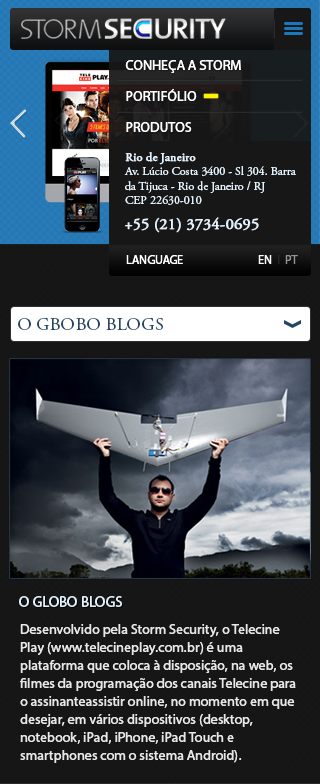
<style>
.page{position:relative;width:320px;height:784px;background:#161616}
.page>*{position:absolute;margin:0}
.t1{font:14px/31.2px "MyriadHebrew-Regular";color:#fefefe}
.t2{font:12px "AGaramondPro-Regular";color:#e4f2fd}
.t3{font:12px "AGaramondPro-Regular";color:#e4f2fd;font-weight:bold}
.t4{font:16px "AGaramondPro-Regular";color:#e4f2fd;font-weight:bold}
.t5{font:12px "MyriadHebrew-Regular";color:#fefefe}
.t6{font:12px "MyriadHebrew-Regular";color:#929292}
.t7{font:18px "AGaramondPro-Regular";color:#244563;text-transform:uppercase}
.t8{font:15px "MyriadHebrew-Regular";color:#e4f2fd}
.t9{font:14px/18px "MyriadHebrew-Regular";color:#e8e7e7}
</style>
<div class="page">
<p class="t1" style="left:125px;top:60px;width:116px;height:72px">CONHEÇA A STORM<br>PORTIFÓLIO<br>PRODUTOS</p>
<p class="t2" style="left:124px;top:152px;width:172px;height:53px"><span class="t3">Rio de Janeiro<br></span>Av. Lúcio Costa 3400 - Sl 304. Barra da Tijuca - Rio de Janeiro / RJ<br>CEP 22630-010</p>
<p class="t4" style="left:125px;top:217px;width:134px;height:16px">+55 (21) 3734-0695</p>
<p class="t5" style="left:126px;top:255px;width:57px;height:9px">LANGUAGE</p>
<p class="t5" style="left:258px;top:255px;width:40px;height:9px">EN     <span class="t6">PT</span></p>
<p class="t7" style="left:18px;top:317px;width:145px;height:13px">O GBOBO BLOGS</p>
<p class="t8" style="left:19px;top:596px;width:103px;height:11px">O GLOBO BLOGS</p>
<p class="t9" style="left:20px;top:624px;width:276px;height:139px">Desenvolvido pela Storm Security, o Telecine Play (www.telecineplay.com.br) é uma plataforma que coloca à disposição, na web, os filmes da programação dos canais Telecine para o assinanteassistir online, no momento em que desejar, em vários dispositivos (desktop, notebook, iPad, iPhone, iPad Touch e smartphones com o sistema Android).</p>
</div>
